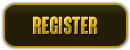
<style>
.page{position:relative;width:130px;height:50px;background:#241d05}
.page>*{position:absolute;margin:0}
.t1{font:24px "ColunaRounded-CondensedBold"}
</style>
<div class="page">
<p class="t1" style="left:33px;top:16px;width:65px;height:19px">REGISTER</p>
</div>
